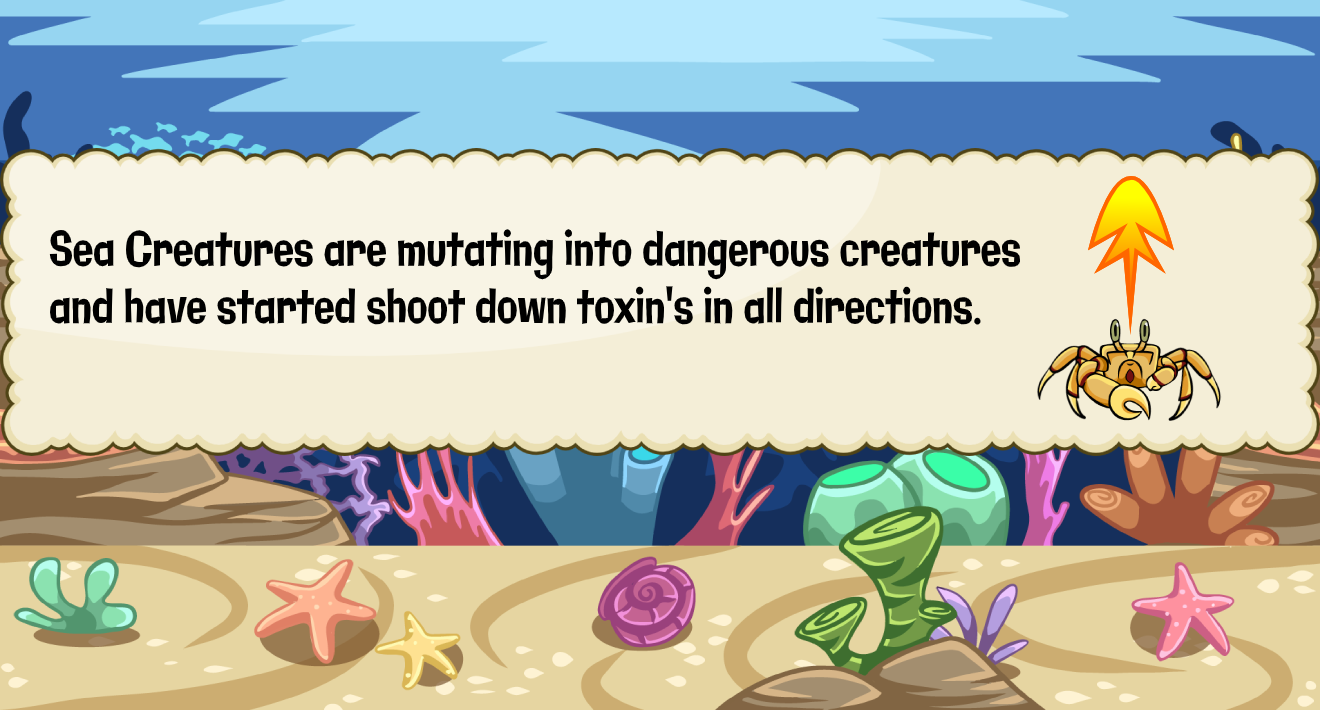
<style>
.page{position:relative;width:1320px;height:710px;background:#f4eed7}
.page>*{position:absolute;margin:0}
.t1{font:47.9px "Galindo-Regular";color:#000000;scale:0.71 1}
</style>
<div class="page">
<p class="t1" style="left:49px;top:229px;width:972px;height:96px">Sea Creatures are mutating into dangerous creatures <br>and have started shoot down toxin's in all directions.</p>
</div>
